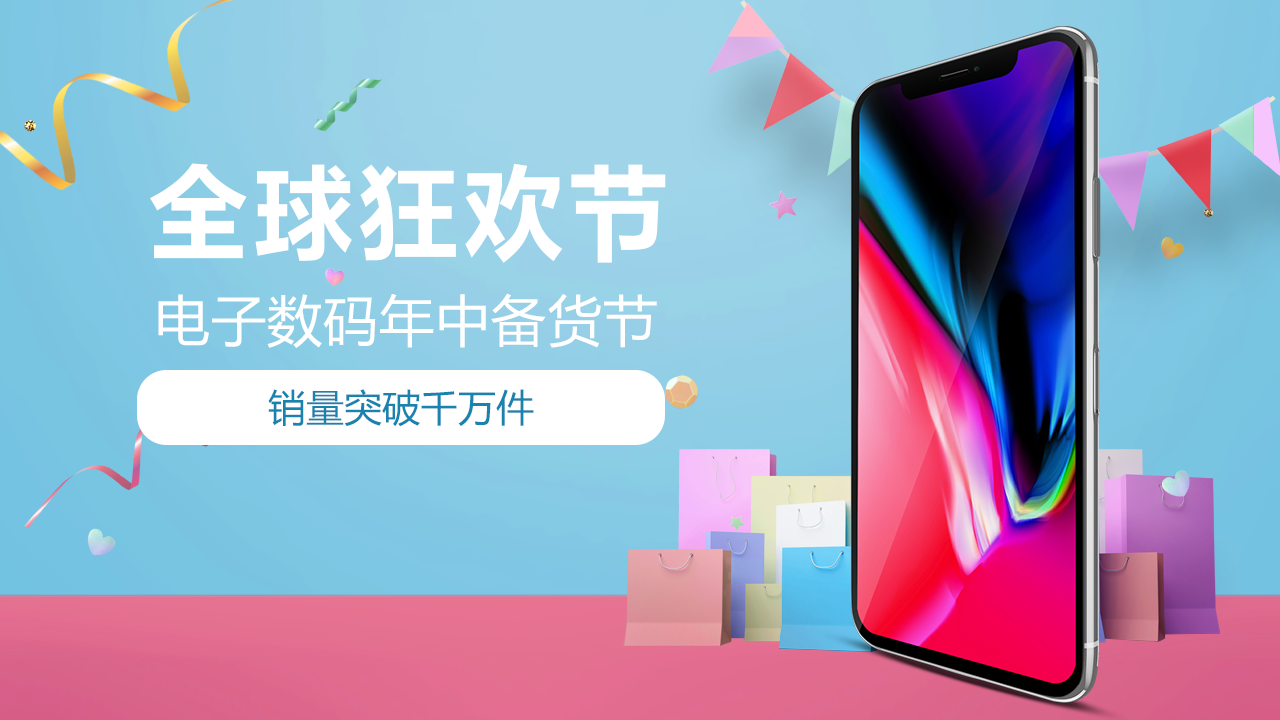
<style>
.page{position:relative;width:1280px;height:720px}
.page>*{position:absolute;margin:0}
.t1{font:105px "MicrosoftYaHei-Bold";color:#ffffff;text-transform:uppercase}
.t2{font:55px "MicrosoftYaHei";letter-spacing:0.02em;color:#ffffff;text-transform:uppercase}
.t3{font:38px "MicrosoftYaHei";color:#1983af;text-transform:uppercase}
</style>
<div class="page">
<p class="t1" style="left:150px;top:163px;width:516px;height:100px">全球狂欢节</p>
<p class="t2" style="left:158px;top:293px;width:499px;height:55px">电子数码年中备货节</p>
<p class="t3" style="left:268px;top:389px;width:266px;height:38px">销量突破千万件</p>
</div>
